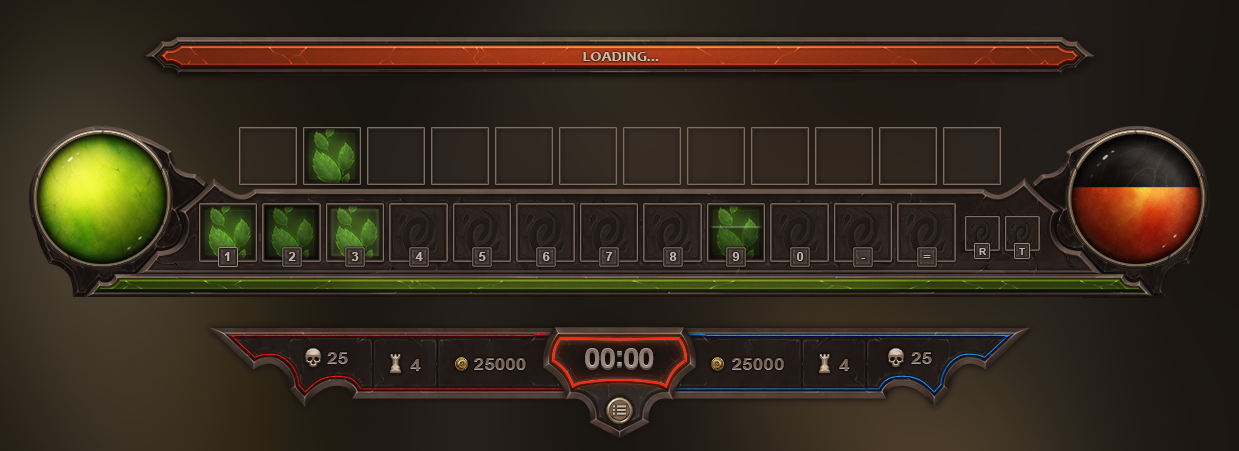
<style>
.page{position:relative;width:1239px;height:451px}
.page>*{position:absolute;margin:0}
.t1{font:14.4px "Candara-Bold";color:#cfbaa4;text-transform:uppercase;scale:1.11 1}
.t2{font:11.7px "Arial-BoldMT";color:#c4b2a8;text-transform:uppercase;scale:1.11 1}
.t3{font:9px "Arial-BoldMT";color:#c4b2a8;text-transform:uppercase;scale:1.11 1}
.t4{font:17.1px "Arial-BoldMT";color:#776255;text-transform:uppercase;scale:1.11 1}
.t5{font:27px "Arial-BoldMT";letter-spacing:-0.05em;color:#908076;text-transform:uppercase;scale:1.11 1}
.t6{font:17px "Arial-BoldMT";color:#776255;text-transform:uppercase;scale:1.11 1}
.t7{font:17px "Arial-BoldMT";color:#776255;text-transform:uppercase;scale:1.12 1}
</style>
<div class="page">
<p class="t1" style="left:583px;top:52px;width:76px;height:9px">loading...</p>
<p class="t2" style="left:224px;top:252px;width:6px;height:9px">1</p>
<p class="t2" style="left:288px;top:252px;width:8px;height:9px">2</p>
<p class="t2" style="left:351px;top:252px;width:8px;height:9px">3</p>
<p class="t2" style="left:415px;top:252px;width:8px;height:9px">4</p>
<p class="t2" style="left:479px;top:252px;width:7px;height:9px">5</p>
<p class="t2" style="left:543px;top:252px;width:7px;height:9px">6</p>
<p class="t2" style="left:606px;top:252px;width:7px;height:9px">7</p>
<p class="t2" style="left:669px;top:252px;width:8px;height:9px">8</p>
<p class="t2" style="left:732px;top:252px;width:8px;height:9px">9</p>
<p class="t2" style="left:797px;top:252px;width:7px;height:9px">0</p>
<p class="t2" style="left:923px;top:255px;width:8px;height:3px">=</p>
<p class="t3" style="left:979px;top:248px;width:7px;height:7px">R</p>
<p class="t3" style="left:1019px;top:248px;width:6px;height:7px">t</p>
<p class="t2" style="left:861px;top:258px;width:5px;height:1px">-</p>
<p class="t4" style="left:327px;top:352px;width:21px;height:12px">25</p>
<p class="t5" style="left:585px;top:348px;width:69px;height:20px">00:00</p>
<p class="t5" style="left:585px;top:348px;width:69px;height:20px">00:00</p>
<p class="t6" style="left:911px;top:352px;width:21px;height:12px">25</p>
<p class="t4" style="left:410px;top:359px;width:11px;height:12px">4</p>
<p class="t4" style="left:474px;top:358px;width:52px;height:12px">25000</p>
<p class="t7" style="left:732px;top:358px;width:52px;height:12px">25000</p>
<p class="t6" style="left:839px;top:359px;width:11px;height:12px">4</p>
</div>
